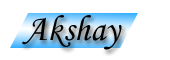
<style>
.page{position:relative;width:170px;height:60px;background:#ffffff}
.page>*{position:absolute;margin:0}
.t1{font:36.6px "MonotypeCorsiva";color:#000000}
</style>
<div class="page">
<p class="t1" style="left:22px;top:15px;width:100px;height:35px">Akshay</p>
</div>
